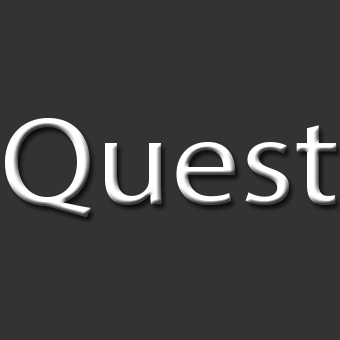
<style>
.page{position:relative;width:340px;height:340px;background:#333333}
.page>*{position:absolute;margin:0}
.t1{font:126.5px "MyriadHebrew-Regular";color:#ffffff;scale:1.09 1}
</style>
<div class="page">
<p class="t1" style="left:5px;top:118px;width:332px;height:100px">Quest</p>
</div>
